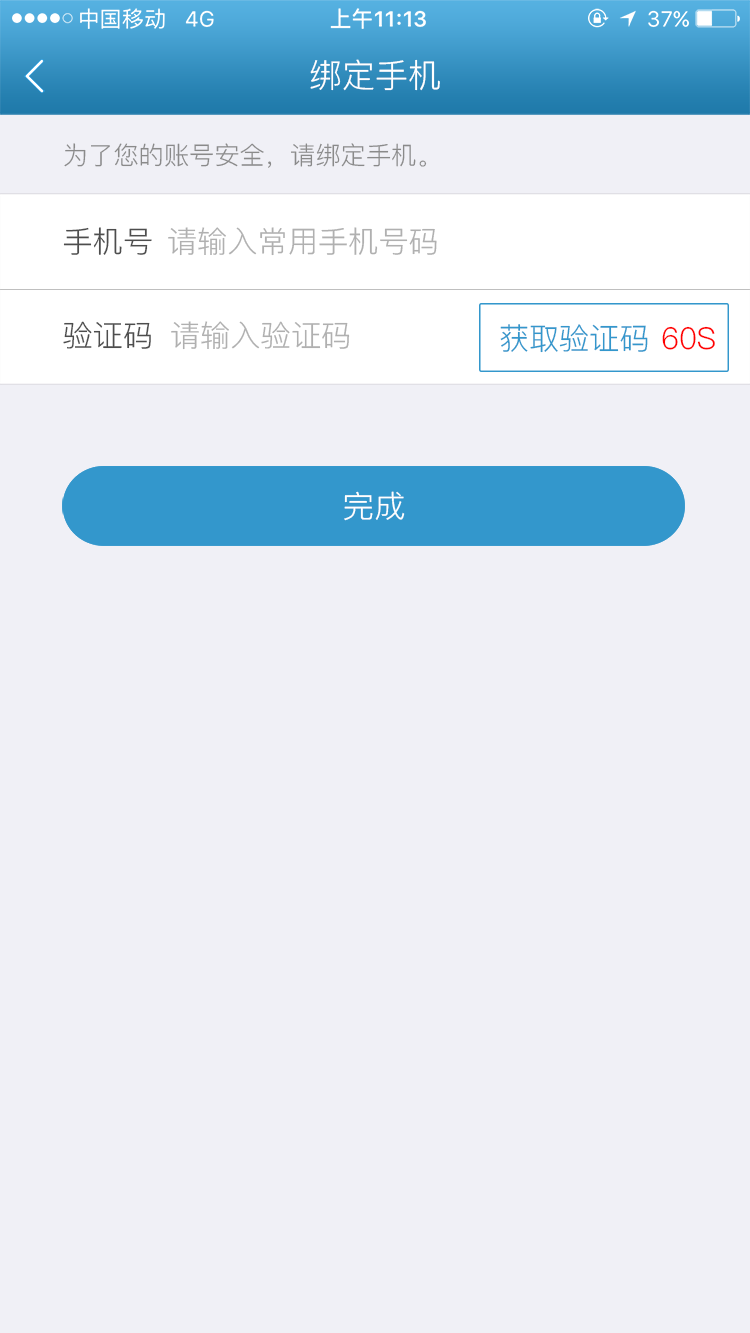
<style>
.page{position:relative;width:750px;height:1333px;background:#f0f0f6}
.page>*{position:absolute;margin:0}
.t1{font:33.3px "PingFang-SC-Regular";color:#ffffff}
.t2{font:25px "PingFang-SC-Regular";color:#8a8a8a}
.t3{font:30px "PingFang-SC-Regular";color:#4d4d4d}
.t4{font:30px "PingFang-SC-Regular";color:#b0b0b0}
.t5{font:30.2px "PingFang-SC-Regular";color:#3397cc}
.t6{font:30.2px "PingFang-SC-Regular";color:#ff0000}
.t7{font:30.9px "PingFang-SC-Regular";color:#ffffff}
</style>
<div class="page">
<p class="t1" style="left:310px;top:59px;width:130px;height:32px">绑定手机</p>
<p class="t2" style="left:64px;top:143px;width:363px;height:25px">为了您的账号安全，请绑定手机。</p>
<p class="t3" style="left:63px;top:227px;width:89px;height:28px">手机号</p>
<p class="t4" style="left:168px;top:227px;width:269px;height:29px">请输入常用手机号码</p>
<p class="t3" style="left:63px;top:321px;width:88px;height:28px">验证码</p>
<p class="t4" style="left:171px;top:321px;width:179px;height:29px">请输入验证码</p>
<p class="t5" style="left:500px;top:324px;width:148px;height:29px">获取验证码</p>
<p class="t6" style="left:662px;top:326px;width:53px;height:24px">60S</p>
<p class="t7" style="left:344px;top:491px;width:61px;height:30px">完成</p>
</div>
